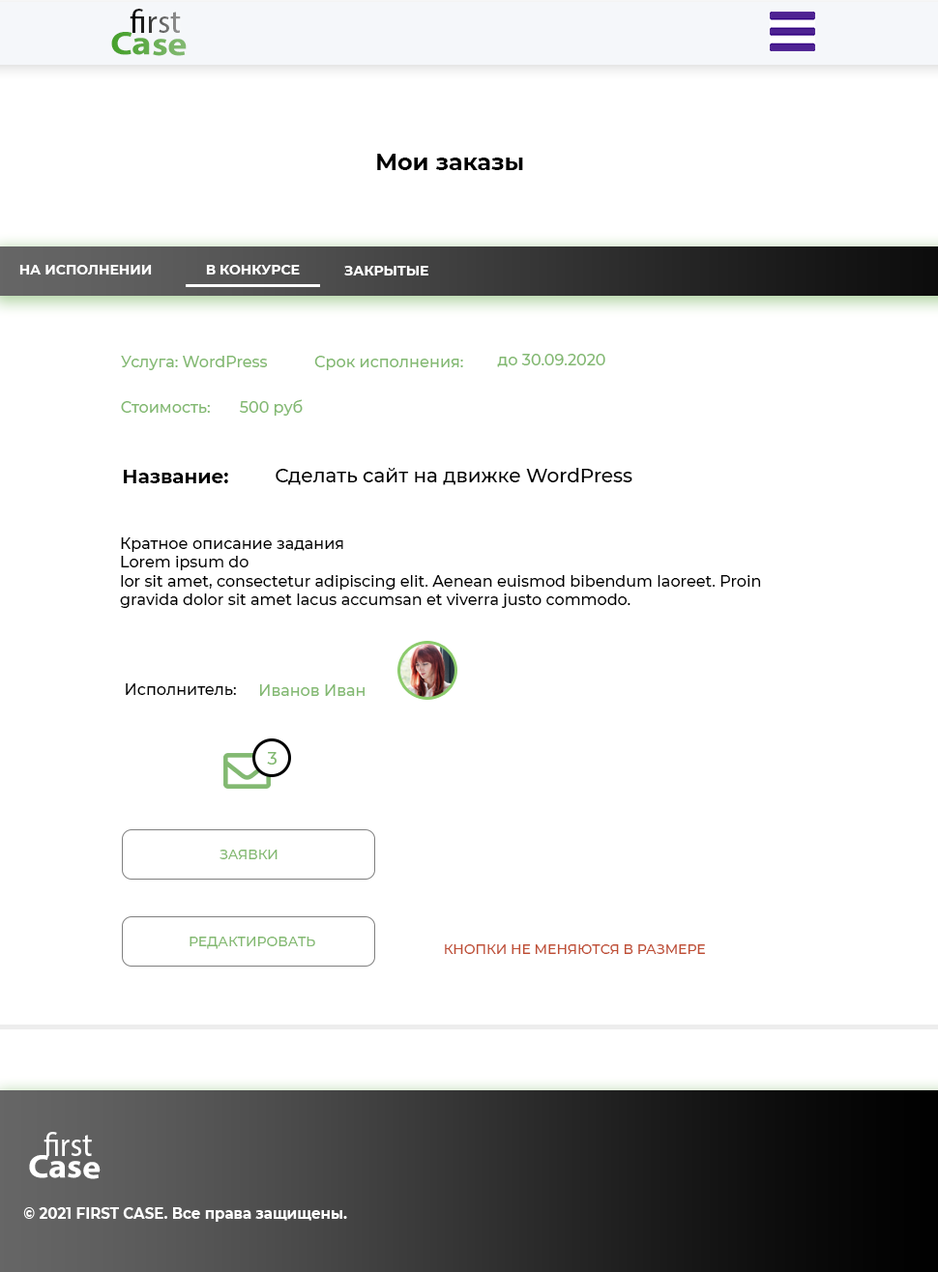
<style>
.page{position:relative;width:938px;height:1272px;background:#ffffff}
.page>*{position:absolute;margin:0}
.t1{font:32.9px "MyriadPro-Regular"}
.t2{font:32.9px "MyriadPro-Bold";scale:1.13 1}
.t3{font:32.9px "MyriadPro-Regular";scale:1.13 1}
.t4{font:23.2px "Montserrat-Bold";color:#000000}
.t5{font:13.5px "Montserrat-Bold";color:#ffffff;text-transform:uppercase}
.t6{font:15.5px "Montserrat-Medium";color:#82b971}
.t7{font:19.3px "Montserrat-Bold";color:#000000}
.t8{font:19.3px "Montserrat-Medium";color:#000000}
.t9{font:15.5px "Montserrat-Medium";color:#000000}
.t10{font:17.4px "Montserrat-Medium";color:#82b970}
.t11{font:13.5px "Montserrat-Medium";color:#82b970;text-transform:uppercase}
.t12{font:13.5px "Montserrat-Medium";color:#bf4e34;text-transform:uppercase}
.t13{font:32.9px "MyriadPro-Regular";color:#ffffff;scale:0.94 1}
.t14{font:32.9px "MyriadPro-Bold";color:#ffffff;scale:1.06 1}
.t15{font:32.9px "MyriadPro-Regular";color:#ffffff;scale:1.06 1}
.t16{font:15.5px "Montserrat-Bold";color:#ffffff;scale:0.94 1}
</style>
<div class="page">
<p class="t1" style="left:130px;top:9px;width:51px;height:24px">first</p>
<p class="t2" style="left:111px;top:32px;width:76px;height:24px;rotate:1deg"><span class="t3">       </span>Case</p>
<p class="t4" style="left:377px;top:154px;width:146px;height:16px">Мои заказы</p>
<p class="t5" style="left:19px;top:265px;width:133px;height:9px">На исполнении</p>
<p class="t5" style="left:206px;top:265px;width:94px;height:9px">В конкурсе</p>
<p class="t5" style="left:344px;top:266px;width:84px;height:9px">Закрытые</p>
<p class="t6" style="left:497px;top:354px;width:108px;height:13px">до 30.09.2020</p>
<p class="t6" style="left:121px;top:356px;width:147px;height:14px">Услуга: WordPress</p>
<p class="t6" style="left:314px;top:356px;width:149px;height:14px">Срок исполнения:</p>
<p class="t6" style="left:121px;top:401px;width:89px;height:12px">Стоимость:</p>
<p class="t6" style="left:240px;top:399px;width:63px;height:17px">500 руб</p>
<p class="t7" style="left:124px;top:470px;width:104px;height:13px">Название:</p>
<p class="t8" style="left:275px;top:468px;width:357px;height:17px">Сделать сайт на движке WordPress</p>
<p class="t9" style="left:120px;top:537px;width:641px;height:71px">Кратное описание задания<br>Lorem ipsum do<br>lor sit amet, consectetur adipiscing elit. Aenean euismod bibendum laoreet. Proin gravida dolor sit amet lacus accumsan et viverra justo commodo.</p>
<p class="t9" style="left:126px;top:683px;width:110px;height:12px">Исполнитель:</p>
<p class="t6" style="left:259px;top:684px;width:105px;height:12px">Иванов Иван</p>
<p class="t10" style="left:267px;top:752px;width:9px;height:13px">3</p>
<p class="t11" style="left:219px;top:850px;width:58px;height:9px">заявки</p>
<p class="t11" style="left:189px;top:937px;width:126px;height:12px">редактировать</p>
<p class="t12" style="left:445px;top:944px;width:260px;height:10px">кнопки не меняются в размере</p>
<p class="t13" style="left:43px;top:1132px;width:49px;height:24px">first</p>
<p class="t14" style="left:29px;top:1155px;width:72px;height:24px;rotate:1deg"><span class="t15">       </span>Case</p>
<p class="t16" style="left:23px;top:1207px;width:324px;height:15px">© 2021 FIRST CASE. Все права защищены.</p>
</div>
